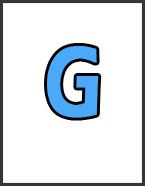
<style>
.page{position:relative;width:145px;height:186px;background:#ffffff}
.page>*{position:absolute;margin:0}
.t1{font:101.3px "ErasITC-Demi";letter-spacing:-0.01em;color:#4aa9f9;font-weight:bold;scale:0.73 1}
</style>
<div class="page">
<p class="t1" style="left:47px;top:46px;width:52px;height:72px">G</p>
</div>
